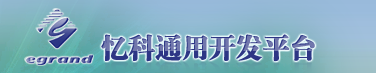
<style>
.page{position:relative;width:376px;height:73px}
.page>*{position:absolute;margin:0}
.t1{font:26.9px "FZCSJW--GB1-0"}
</style>
<div class="page">
<p class="t1" style="left:101px;top:34px;width:214px;height:28px">忆科通用开发平台</p>
</div>
